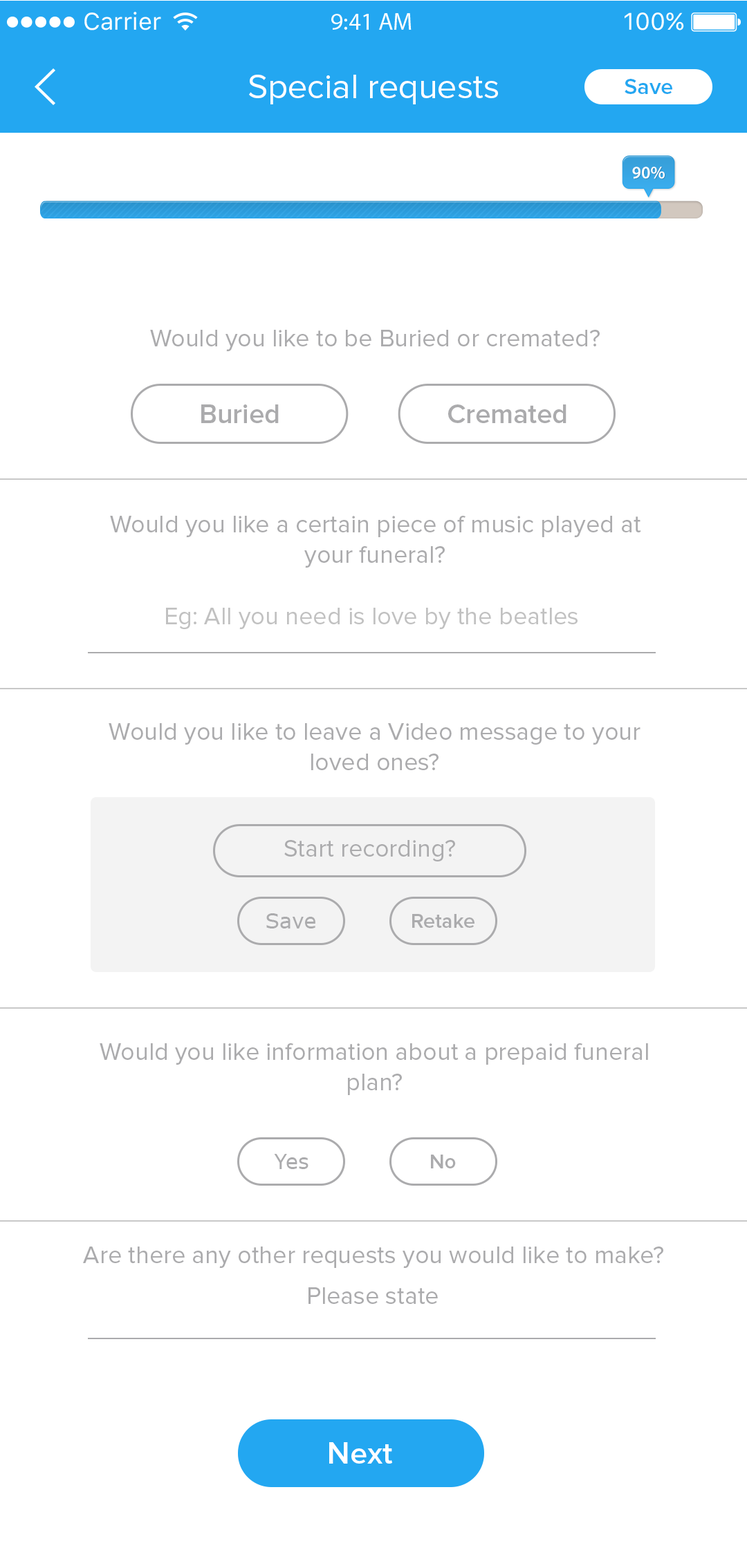
<style>
.page{position:relative;width:747px;height:1568px;background:#ffffff}
.page>*{position:absolute;margin:0}
.t1{font:34.7px "ProximaNova-Regular";color:#ffffff}
.t2{font:22.5px "ProximaNova-Semibold";color:#23a7f1}
.t3{font:17.5px "MyriadPro-Semibold";color:#ffffff}
.t4{font:24.9px "ProximaNova-Regular";color:#ababad}
.t5{font:27.7px "ProximaNova-Semibold";color:#ababad}
.t6{font:24.9px "ProximaNova-Regular";color:#c1c1c1}
.t7{font:20.7px "Verdana";color:#ababad}
.t8{font:20.7px "ProximaNova-Semibold";color:#ababad}
.t9{font:31.1px "ProximaNova-Semibold";color:#ffffff}
</style>
<div class="page">
<p class="t1" style="left:249px;top:75px;width:249px;height:29px">Special requests</p>
<p class="t2" style="left:624px;top:79px;width:48px;height:15px">Save</p>
<p class="t3" style="left:632px;top:167px;width:32px;height:12px">90%</p>
<p class="t4" style="left:150px;top:330px;width:449px;height:21px">Would you like to be Buried or cremated?</p>
<p class="t5" style="left:201px;top:404px;width:78px;height:19px">Buried</p>
<p class="t5" style="left:448px;top:404px;width:118px;height:19px">Cremated</p>
<p class="t4" style="left:110px;top:516px;width:531px;height:52px;text-align:center">Would you like a certain piece of music played at<br>your funeral?</p>
<p class="t6" style="left:166px;top:608px;width:411px;height:21px">Eg: All you need is love by the beatles</p>
<p class="t4" style="left:109px;top:723px;width:531px;height:47px;text-align:center">Would you like to leave a Video message to your<br>loved ones?</p>
<p class="t4" style="left:284px;top:840px;width:171px;height:21px">Start recording?</p>
<p class="t7" style="left:266px;top:913px;width:49px;height:15px">Save</p>
<p class="t8" style="left:412px;top:914px;width:62px;height:14px">Retake</p>
<p class="t4" style="left:100px;top:1043px;width:548px;height:52px;text-align:center">Would you like information about a prepaid funeral<br>plan?</p>
<p class="t7" style="left:274px;top:1154px;width:34px;height:15px">Yes</p>
<p class="t8" style="left:431px;top:1155px;width:25px;height:13px">No</p>
<p class="t4" style="left:83px;top:1247px;width:580px;height:21px">Are there any other requests you would like to make?</p>
<p class="t4" style="left:308px;top:1287px;width:130px;height:17px">Please state</p>
<p class="t9" style="left:329px;top:1442px;width:63px;height:22px">Next</p>
</div>
